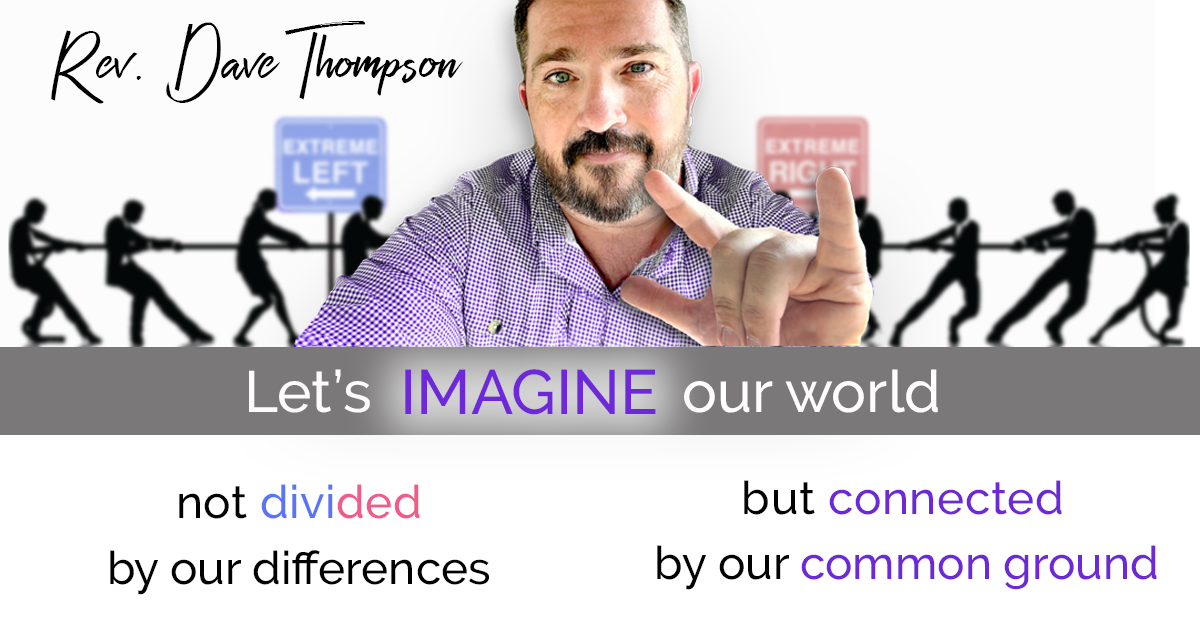
<style>
.page{position:relative;width:1200px;height:630px;background:#ffffff}
.page>*{position:absolute;margin:0}
.t1{font:83.3px "Zaynefree";color:#000000}
.t2{font:58.3px "Raleway-Medium";color:#fefeff}
.t3{font:58.3px "Raleway-Medium";color:#fdfbfb}
.t4{font:62.5px "Raleway-Medium";color:#6d28d9}
.t5{font:45.8px "Raleway-Medium";letter-spacing:0.01em;color:#5a74f6}
.t6{font:45.8px "Raleway-Medium";letter-spacing:0.01em;color:#010101}
.t7{font:45.8px "Raleway-Medium";letter-spacing:0.01em;color:#f05b8a}
.t8{font:45.8px "Raleway-Medium";letter-spacing:0.014em;color:#6d28d9}
.t9{font:45.8px "Raleway-Medium";letter-spacing:0.014em;color:#010101}
.t10{font:45.8px "Raleway-Medium";color:#6d28d9}
.t11{font:45.8px "Raleway-Medium";color:#010101}
</style>
<div class="page">
<p class="t1" style="left:51px;top:21px;width:413px;height:83px">Rev. Dave Thompson</p>
<p class="t2" style="left:249px;top:369px;width:689px;height:44px"><span class="t3">Let’s              </span>       our world</p>
<p class="t4" style="left:405px;top:369px;width:251px;height:46px">IMAGINE</p>
<p class="t5" style="left:179px;top:484px;width:241px;height:35px"><span class="t6">not </span>divi<span class="t7">ded</span></p>
<p class="t8" style="left:744px;top:480px;width:318px;height:35px"><span class="t9">but </span>connected</p>
<p class="t10" style="left:657px;top:545px;width:500px;height:45px"><span class="t11">by our </span>common ground</p>
<p class="t11" style="left:110px;top:550px;width:379px;height:45px">by our differences</p>
</div>
